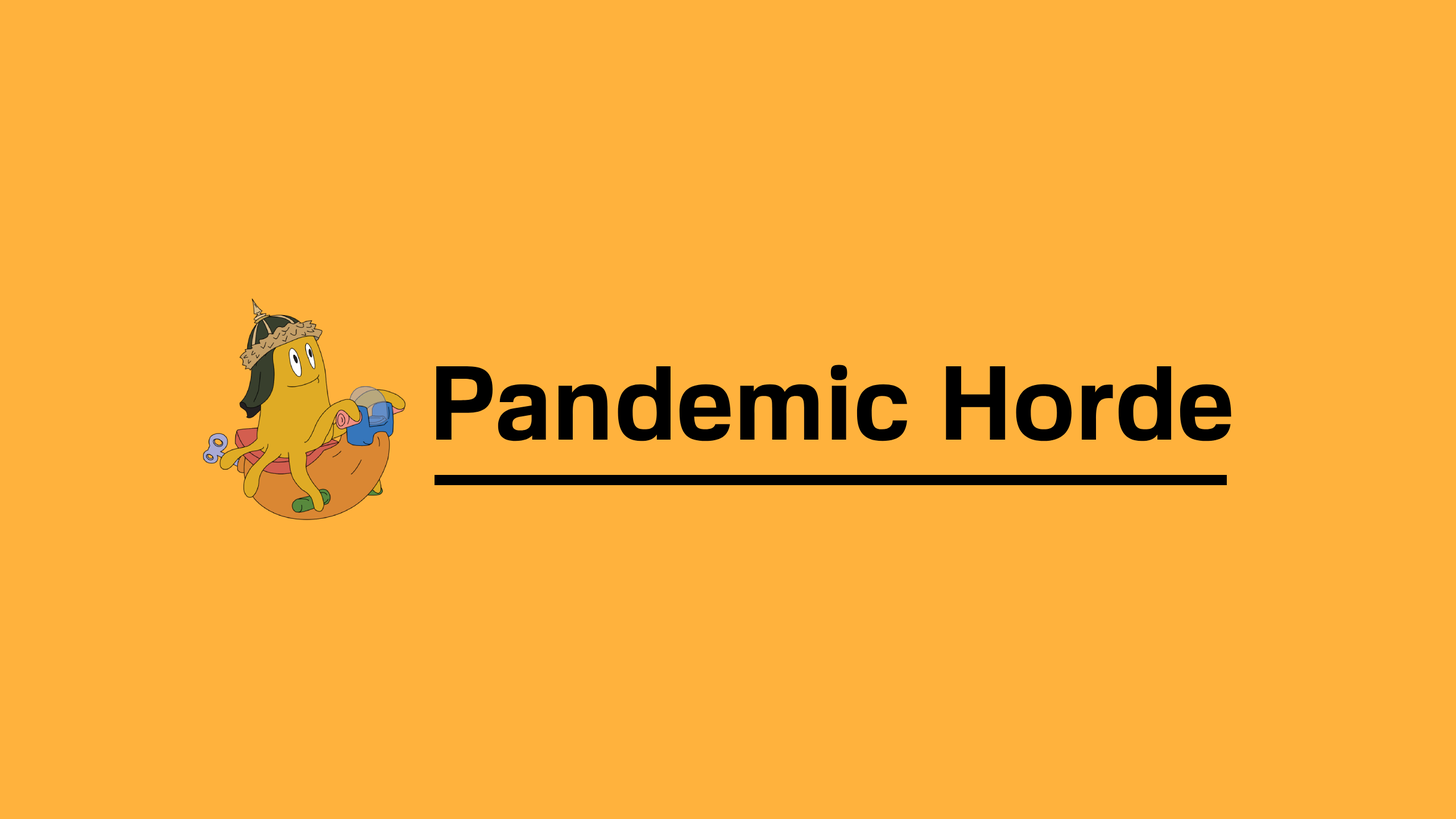
<style>
.page{position:relative;width:1456px;height:819px;background:#ffb23d}
.page>*{position:absolute;margin:0}
.t1{font:102.4px "FamiliarPro-Bold";color:#000000}
</style>
<div class="page">
<p class="t1" style="left:436px;top:365px;width:795px;height:76px">Pandemic Horde</p>
</div>
